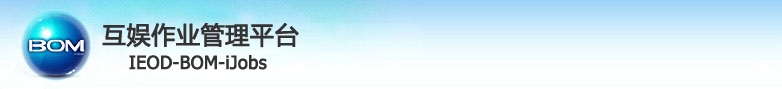
<style>
.page{position:relative;width:782px;height:89px}
.page>*{position:absolute;margin:0}
.t1{font:24px "MicrosoftYaHei";color:#343232;font-weight:bold}
.t2{font:18px "Tahoma";color:#343232;font-weight:bold}
.t3{font:18px "YouYuan";color:#343232;font-weight:bold}
</style>
<div class="page">
<p class="t1" style="left:102px;top:22px;width:197px;height:26px">互娱作业管理平台</p>
<p class="t2" style="left:129px;top:55px;width:138px;height:15px"><span class="t3">  </span>IEOD-BOM-iJobs</p>
</div>
